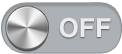
<style>
.page{position:relative;width:122px;height:54px;background:#acb1b5}
.page>*{position:absolute;margin:0}
.t1{font:26.3px "HelveticaLTStd-Bold";color:#ebebec}
</style>
<div class="page">
<p class="t1" style="left:59px;top:17px;width:52px;height:21px">OFF</p>
</div>
